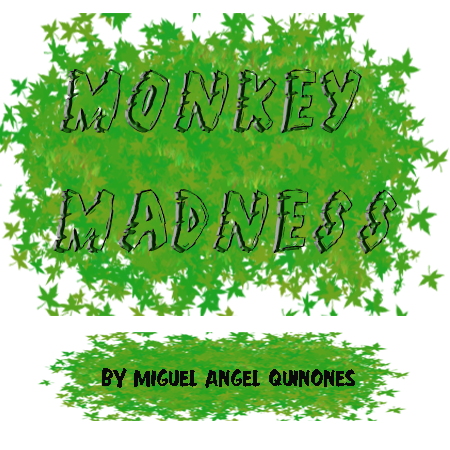
<style>
.page{position:relative;width:450px;height:450px;background:#ffffff}
.page>*{position:absolute;margin:0}
.t1{font:100px "JungleFever";scale:0.82 1}
.t2{font:25px "FastAction";color:#090909}
</style>
<div class="page">
<p class="t1" style="left:52px;top:68px;width:346px;height:186px;text-align:center">monkey <br>madness</p>
<p class="t2" style="left:102px;top:368px;width:253px;height:20px">BY MIGUEL ANGEL QUINONES</p>
</div>
